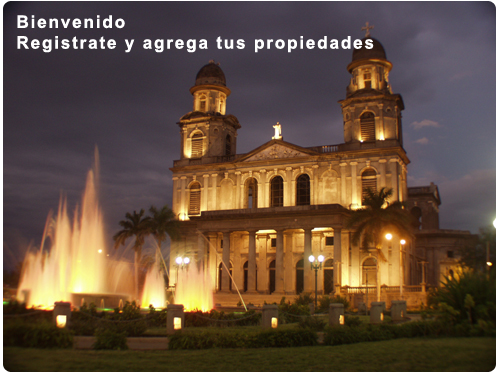
<style>
.page{position:relative;width:500px;height:375px}
.page>*{position:absolute;margin:0}
.t1{font:17.3px "Arial-BoldMT";letter-spacing:0.1em;color:#ffffff}
</style>
<div class="page">
<p class="t1" style="left:17px;top:15px;width:357px;height:38px">Bienvenido <br>Registrate y agrega tus propiedades</p>
</div>
